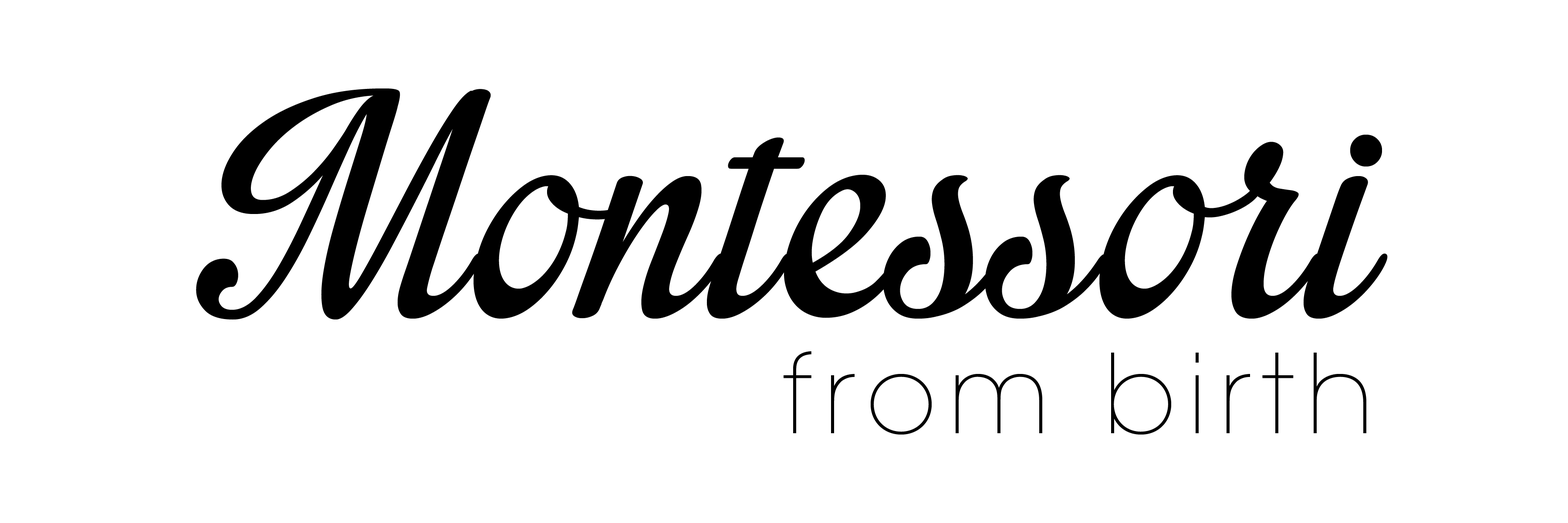
<style>
.page{position:relative;width:1568px;height:523px;background:#ffffff}
.page>*{position:absolute;margin:0}
.t1{font:435.6px "ImpregnablePersonalUseOnly";letter-spacing:0.01em;color:#000000}
.t2{font:109px "AvantGarde-ExtraLight";letter-spacing:0.1em;color:#000000}
</style>
<div class="page">
<p class="t1" style="left:196px;top:88px;width:1192px;height:232px">Montessori</p>
<p class="t2" style="left:784px;top:351px;width:582px;height:83px">from birth</p>
</div>
